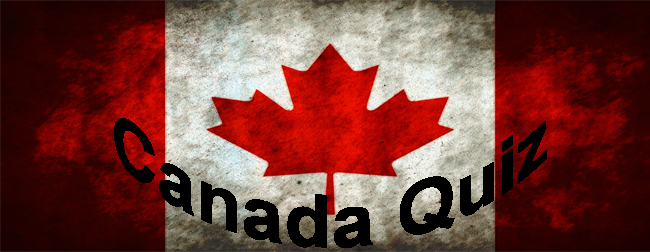
<style>
.page{position:relative;width:650px;height:252px}
.page>*{position:absolute;margin:0}
.t1{font:72px "Arial-BoldMT";color:#000000}
</style>
<div class="page">
<p class="t1" style="left:114px;top:118px;width:433px;height:130px">Canada Quiz</p>
</div>
